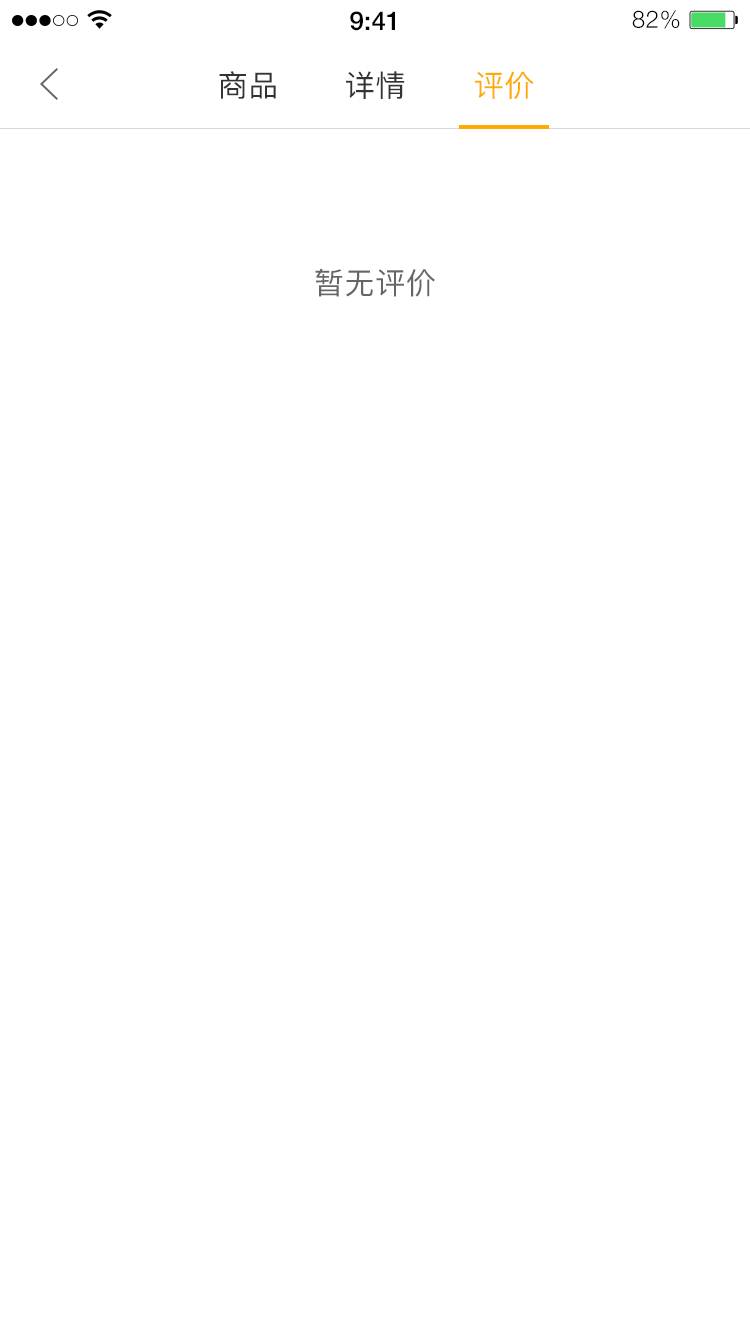
<style>
.page{position:relative;width:750px;height:1334px;background:#ffffff}
.page>*{position:absolute;margin:0}
.t1{font:26px "HelveticaNeue-Medium";color:#000000}
.t2{font:24px "HelveticaNeue-Light";letter-spacing:0.025em;color:#000000}
.t3{font:30px "PingFang-SC-Medium";letter-spacing:0.025em;color:#333333}
.t4{font:30px "PingFang-SC-Medium";letter-spacing:0.025em;color:#ffaa00}
.t5{font:30px "PingFang-SC-Medium";letter-spacing:0.025em;color:#666666}
</style>
<div class="page">
<p class="t1" style="left:350px;top:11px;width:45px;height:20px">9:41</p>
<p class="t2" style="left:632px;top:10px;width:48px;height:19px">82%</p>
<p class="t3" style="left:219px;top:71px;width:57px;height:28px">商品</p>
<p class="t3" style="left:346px;top:71px;width:59px;height:28px">详情</p>
<p class="t4" style="left:475px;top:71px;width:59px;height:28px">评价</p>
<p class="t5" style="left:315px;top:268px;width:120px;height:29px">暂无评价</p>
</div>
